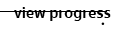
<style>
.page{position:relative;width:130px;height:29px;background:#ffffff}
.page>*{position:absolute;margin:0}
.t1{font:16px "SukhumvitSet-Bold";color:#000000}
</style>
<div class="page">
<p class="t1" style="left:14px;top:7px;width:97px;height:14px">view progress</p>
</div>
